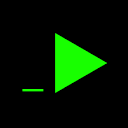
<style>
.page{position:relative;width:128px;height:128px;background:#000000}
.page>*{position:absolute;margin:0}
.t1{font:36px "ArialMT";color:#18ff00}
</style>
<div class="page">
<p class="t1" style="left:22px;top:89px;width:22px;height:3px">_</p>
</div>
